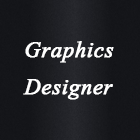
<style>
.page{position:relative;width:140px;height:140px;background:#141519}
.page>*{position:absolute;margin:0}
.t1{font:28px "Vijaya";color:#ffffff;font-weight:bold}
</style>
<div class="page">
<p class="t1" style="left:25px;top:41px;width:89px;height:22px">Graphics</p>
<p class="t1" style="left:23px;top:79px;width:90px;height:21px">Designer</p>
</div>
